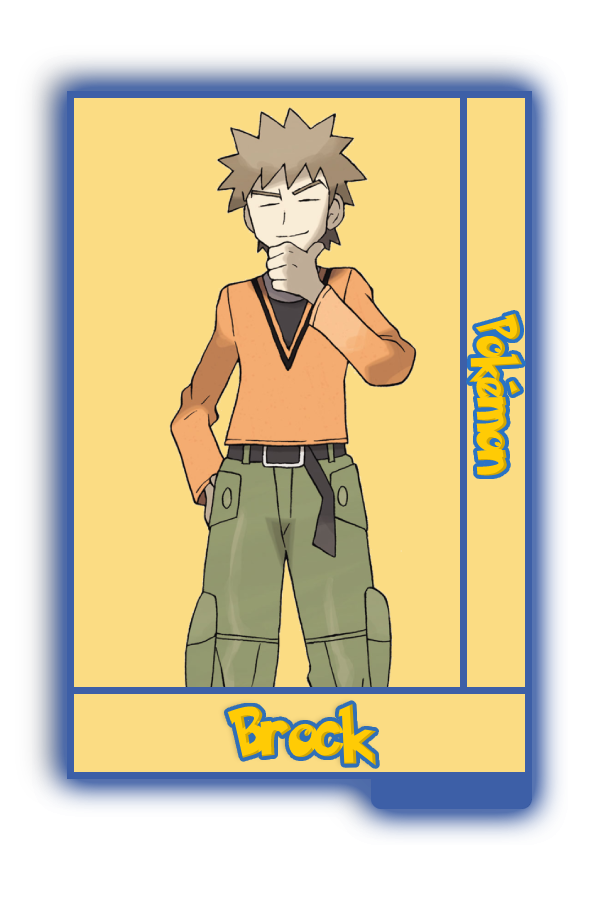
<style>
.page{position:relative;width:600px;height:900px;background:#fbdc83}
.page>*{position:absolute;margin:0}
.t1{font:48.8px "PokemonSolidNormal";color:#ffcb05;scale:0.8 1}
.t2{font:56.6px "PokemonSolidNormal";color:#ffcb05;scale:0.92 1}
</style>
<div class="page">
<p class="t1" style="left:469px;top:313px;width:54px;height:163px;rotate:90deg">Pokémon</p>
<p class="t2" style="left:227px;top:703px;width:150px;height:63px">Brock</p>
</div>
